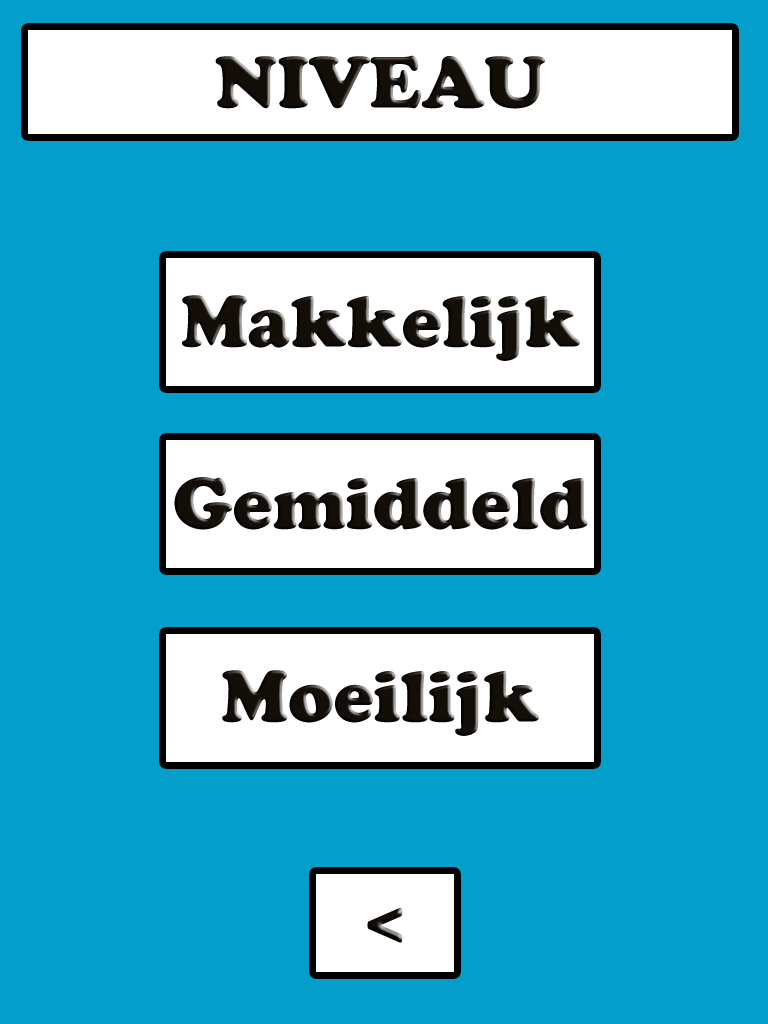
<style>
.page{position:relative;width:768px;height:1024px;background:#039eca}
.page>*{position:absolute;margin:0}
.t1{font:72px "CooperBlackStd";color:#130e08;text-transform:uppercase}
.t2{font:72px "CooperBlackStd";color:#130e08}
</style>
<div class="page">
<p class="t1" style="left:215px;top:55px;width:331px;height:54px"><span class="t2"><br><br><br><br><br><br><br><br><br><br><br><br><br><br><br><br><br><br><br><br><br><br><br><br><br></span><br><br><br>Niveau</p>
<p class="t2" style="left:182px;top:295px;width:398px;height:66px">Makkelijk</p>
<p class="t2" style="left:174px;top:477px;width:414px;height:53px">Gemiddeld</p>
<p class="t2" style="left:222px;top:670px;width:317px;height:66px">Moeilijk</p>
<p class="t2" style="left:367px;top:907px;width:36px;height:36px">&lt;</p>
</div>
